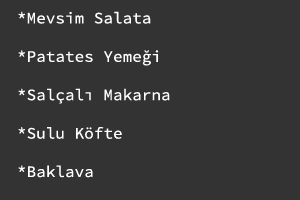
<style>
.page{position:relative;width:300px;height:200px;background:#333333}
.page>*{position:absolute;margin:0}
.t1{font:16px "SourceCodePro-Regular";color:#ffffff}
</style>
<div class="page">
<p class="t1" style="left:18px;top:11px;width:152px;height:167px">*Mevsim Salata<br><br>*Patates Yemeği<br><br>*Salçalı Makarna<br><br>*Sulu Köfte<br><br>*Baklava</p>
</div>
